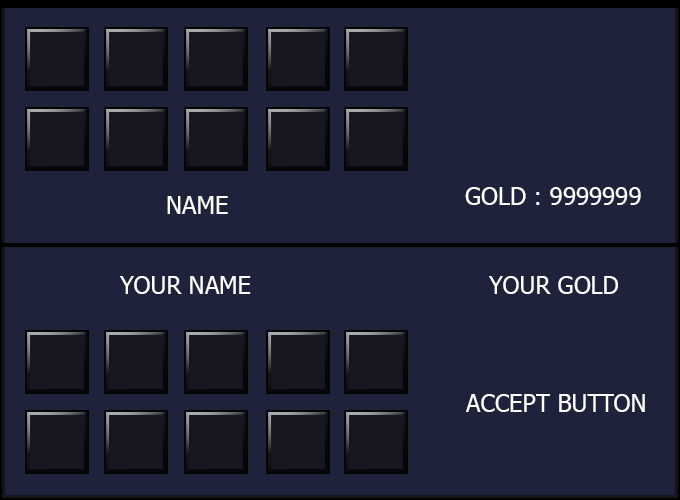
<style>
.page{position:relative;width:680px;height:500px;background:#1e223a}
.page>*{position:absolute;margin:0}
.t1{font:24px "Tahoma";color:#ffffff}
</style>
<div class="page">
<p class="t1" style="left:167px;top:196px;width:61px;height:18px">NAME</p>
<p class="t1" style="left:465px;top:187px;width:176px;height:18px">GOLD : 9999999</p>
<p class="t1" style="left:120px;top:276px;width:131px;height:18px">YOUR NAME</p>
<p class="t1" style="left:489px;top:276px;width:129px;height:18px">YOUR GOLD</p>
<p class="t1" style="left:466px;top:394px;width:179px;height:18px">ACCEPT BUTTON</p>
</div>
